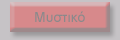
<style>
.page{position:relative;width:120px;height:40px;background:#d7898b}
.page>*{position:absolute;margin:0}
.t1{font:14px "ArialMT";color:#8b898b}
</style>
<div class="page">
<p class="t1" style="left:35px;top:11px;width:50px;height:11px">Μυστικό</p>
</div>
